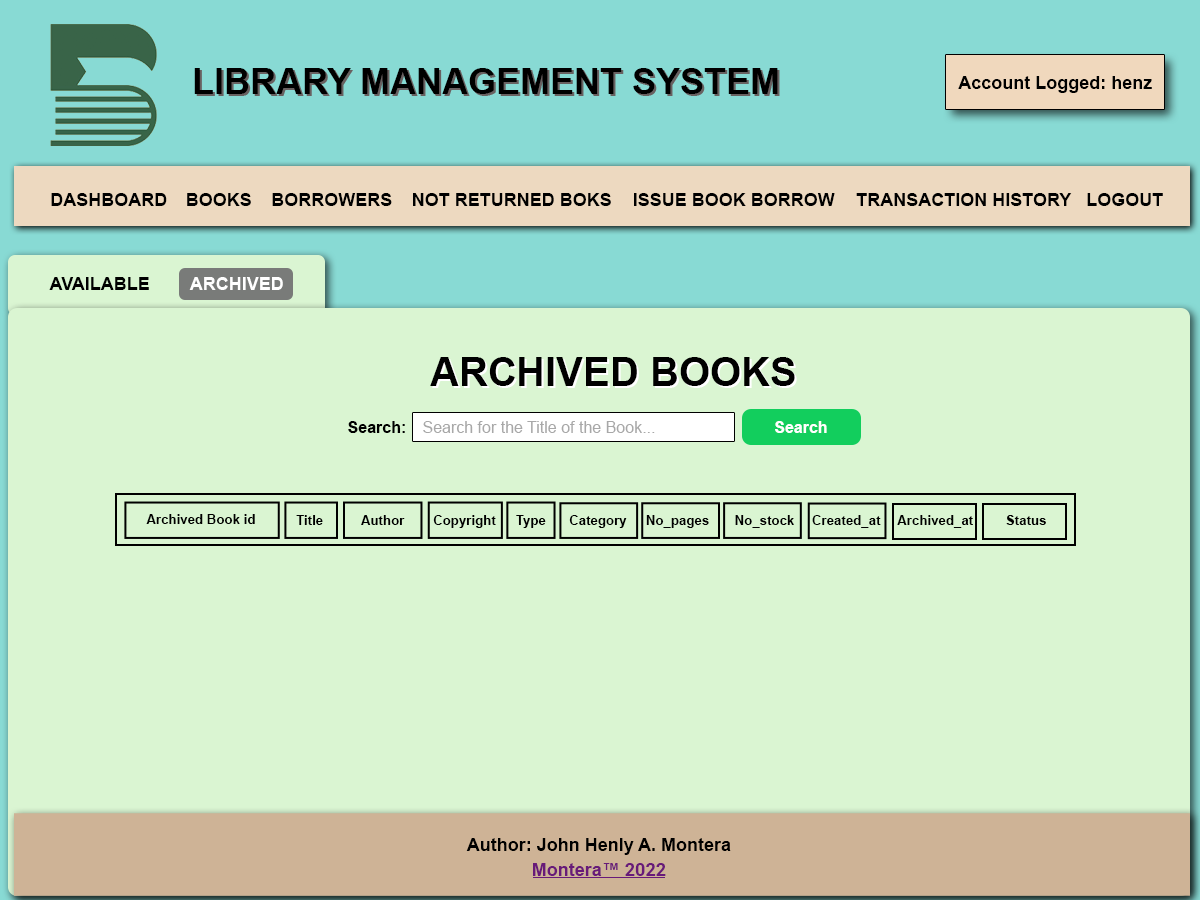
<style>
.page{position:relative;width:1200px;height:900px;background:#daf5d2}
.page>*{position:absolute;margin:0}
.t1{font:36px "Arial-BoldMT";color:#000000}
.t2{font:18px "Arial-BoldMT";color:#000000}
.t3{font:18px "Arial-BoldMT";color:#ffffff}
.t4{font:40px "Arial-BoldMT";color:#000000}
.t5{font:16px "Arial-BoldMT";color:#000000}
.t6{font:16px "ArialMT";color:#a8a8a8}
.t7{font:16px "Arial-BoldMT";color:#ffffff}
.t8{font:13.3px "Arial-BoldMT";color:#000000}
.t9{font:18px "Arial-BoldMT";color:#681a79}
.t10{font:18px "Roboto-Bold";color:#681a79}
</style>
<div class="page">
<p class="t1" style="left:194px;top:68px;width:584px;height:26px">LIBRARY MANAGEMENT SYSTEM</p>
<p class="t2" style="left:958px;top:76px;width:194px;height:17px">Account Logged: henz</p>
<p class="t2" style="left:51px;top:193px;width:116px;height:13px">DASHBOARD</p>
<p class="t2" style="left:187px;top:193px;width:64px;height:13px">BOOKS</p>
<p class="t2" style="left:272px;top:193px;width:120px;height:13px">BORROWERS</p>
<p class="t2" style="left:413px;top:193px;width:198px;height:13px">NOT RETURNED BOKS</p>
<p class="t2" style="left:634px;top:193px;width:201px;height:13px">ISSUE BOOK BORROW</p>
<p class="t2" style="left:856px;top:193px;width:216px;height:13px">TRANSACTION HISTORY</p>
<p class="t2" style="left:1087px;top:193px;width:76px;height:13px">LOGOUT</p>
<p class="t2" style="left:49px;top:277px;width:100px;height:13px">AVAILABLE</p>
<p class="t3" style="left:189px;top:277px;width:94px;height:13px">ARCHIVED</p>
<p class="t4" style="left:430px;top:357px;width:365px;height:29px">ARCHIVED BOOKS</p>
<p class="t5" style="left:348px;top:421px;width:57px;height:12px">Search:</p>
<p class="t6" style="left:423px;top:421px;width:232px;height:12px">Search for the Title of the Book...</p>
<p class="t7" style="left:775px;top:421px;width:52px;height:12px">Search</p>
<p class="t8" style="left:146px;top:514px;width:109px;height:10px">Archived Book id</p>
<p class="t8" style="left:296px;top:515px;width:27px;height:10px">Title</p>
<p class="t8" style="left:361px;top:515px;width:44px;height:10px">Author</p>
<p class="t8" style="left:433px;top:515px;width:63px;height:13px">Copyright</p>
<p class="t8" style="left:516px;top:515px;width:30px;height:13px">Type</p>
<p class="t8" style="left:569px;top:515px;width:58px;height:13px">Category</p>
<p class="t8" style="left:646px;top:515px;width:63px;height:13px">No_pages</p>
<p class="t8" style="left:735px;top:515px;width:59px;height:13px">No_stock</p>
<p class="t8" style="left:812px;top:515px;width:69px;height:13px">Created_at</p>
<p class="t8" style="left:897px;top:515px;width:76px;height:13px">Archived_at</p>
<p class="t8" style="left:1006px;top:515px;width:40px;height:10px">Status</p>
<p class="t2" style="left:466px;top:838px;width:265px;height:17px">Author: John Henly A. Montera</p>
<p class="t9" style="left:533px;top:863px;width:133px;height:13px">Montera™ <span class="t10">2022</span></p>
</div>
